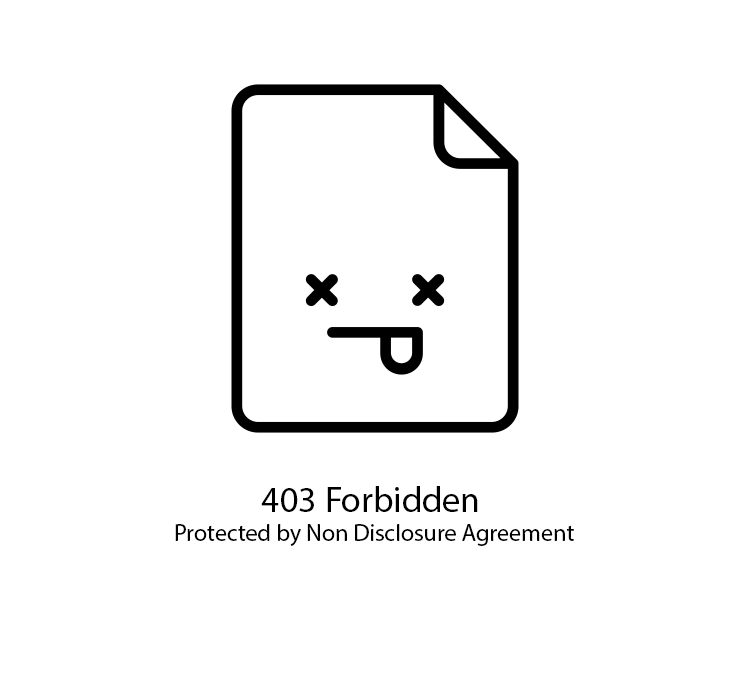
<style>
.page{position:relative;width:750px;height:700px;background:#ffffff}
.page>*{position:absolute;margin:0}
.t1{font:24px "MyriadPro-Regular";color:#000000}
.t2{font:36px "MyriadPro-Regular";color:#000000}
</style>
<div class="page">
<p class="t1" style="left:175px;top:486px;width:399px;height:60px;text-align:center"><span class="t2">403 Forbidden <br></span>Protected by Non Disclosure Agreement</p>
</div>
